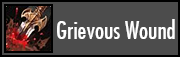
<style>
.page{position:relative;width:180px;height:57px;background:#4c4c4c}
.page>*{position:absolute;margin:0}
.t1{font:24px "FuturaCondensed";color:#ffffff}
</style>
<div class="page">
<p class="t1" style="left:57px;top:19px;width:118px;height:20px">Grievous Wound</p>
</div>
